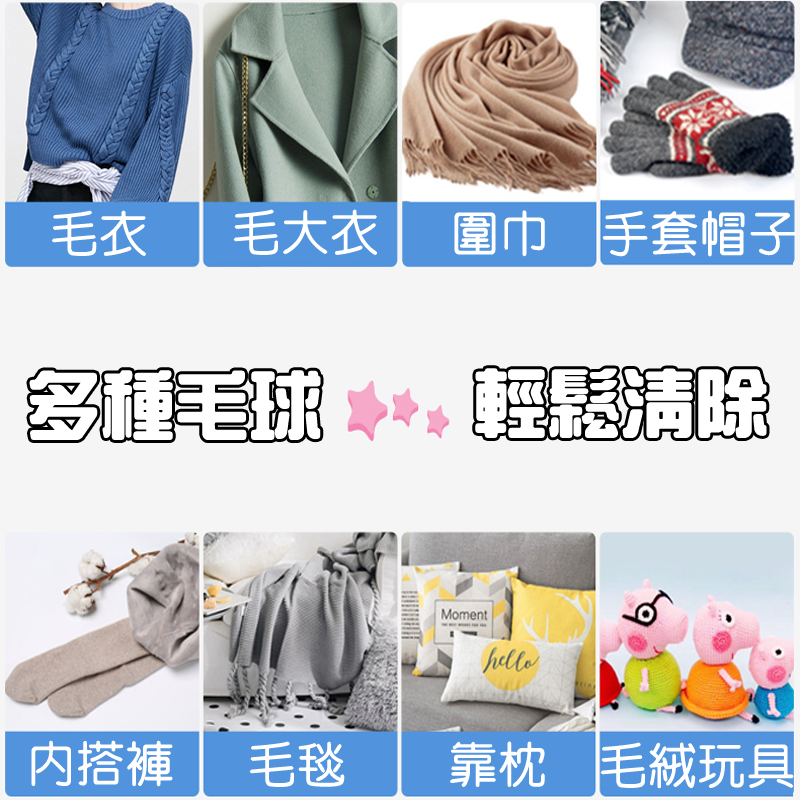
<style>
.page{position:relative;width:800px;height:800px;background:#f5f5f5}
.page>*{position:absolute;margin:0}
.t1{font:48px "HanWangYenLight";color:#ffffff;font-weight:bold}
.t2{font:72px "HanWangZonYi";color:#ffffff;font-weight:bold}
</style>
<div class="page">
<p class="t1" style="left:233px;top:209px;width:144px;height:46px">毛大衣</p>
<p class="t1" style="left:52px;top:210px;width:94px;height:46px">毛衣</p>
<p class="t1" style="left:454px;top:210px;width:91px;height:47px">圍巾</p>
<p class="t1" style="left:602px;top:210px;width:194px;height:47px">手套帽子</p>
<p class="t2" style="left:29px;top:370px;width:292px;height:71px">多種毛球</p>
<p class="t2" style="left:475px;top:368px;width:292px;height:71px">輕鬆清除</p>
<p class="t1" style="left:31px;top:740px;width:142px;height:47px">內搭褲</p>
<p class="t1" style="left:249px;top:741px;width:96px;height:46px">毛毯</p>
<p class="t1" style="left:450px;top:741px;width:95px;height:46px">靠枕</p>
<p class="t1" style="left:600px;top:742px;width:194px;height:47px">毛絨玩具</p>
</div>
